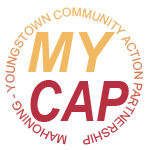
<style>
.page{position:relative;width:150px;height:150px;background:#ffffff}
.page>*{position:absolute;margin:0}
.t1{font:12px "ArialMT";letter-spacing:-0.025em}
.t2{font:55.1px/48.2px "Arial-BoldItalicMT";color:#b73041;scale:0.86 1}
.t3{font:55px/48.2px "Arial-BoldItalicMT";color:#f1b962}
</style>
<div class="page">
<p class="t1" style="left:5px;top:7px;width:139px;height:138px;rotate:179deg">MAHONING - YOUNGSTOWN COMMUNITY ACTION PARTNERSHIP</p>
<p class="t2" style="left:28px;top:32px;width:101px;height:90px"><span class="t3">MY<br></span>CAP</p>
</div>
